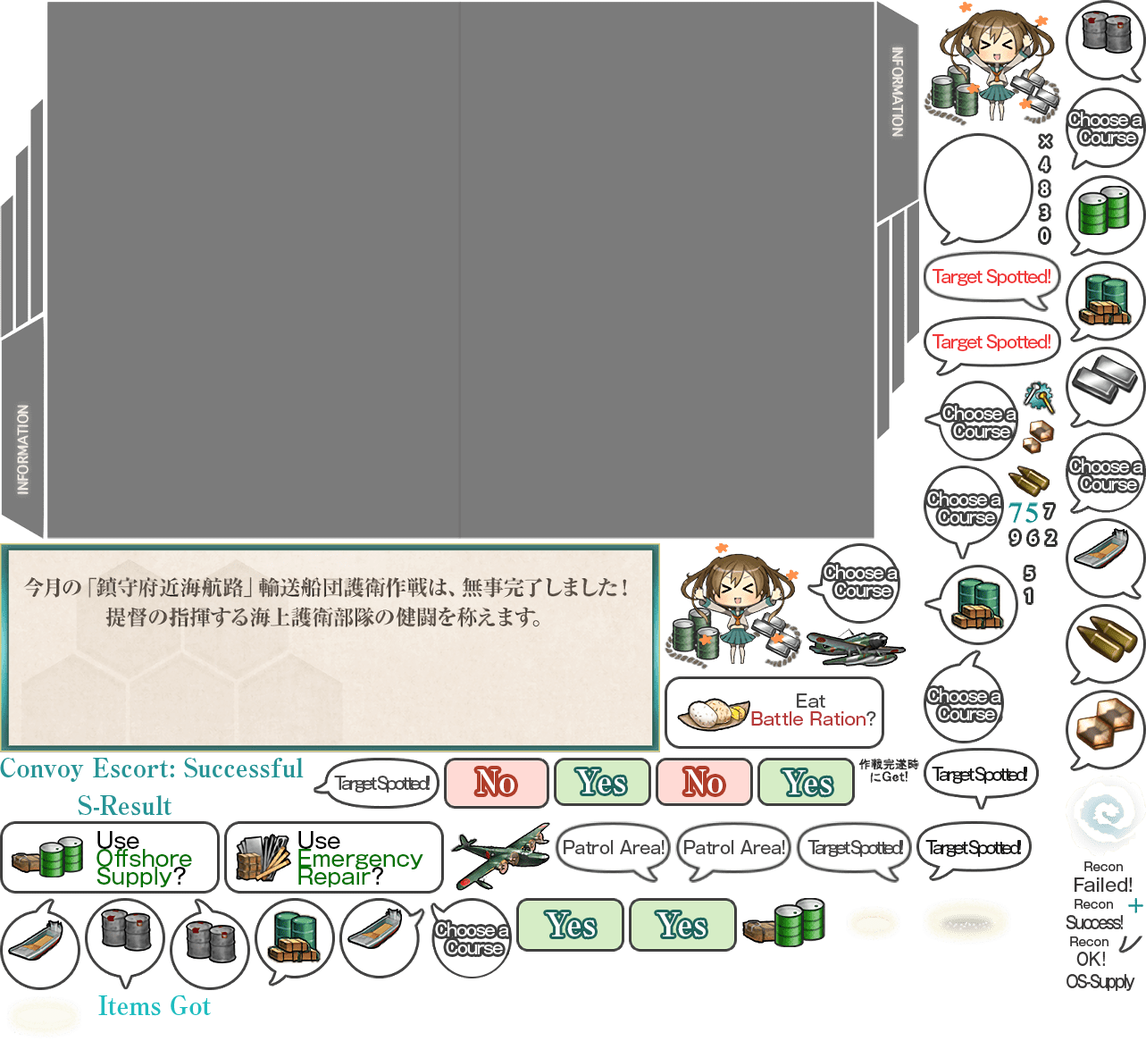
<style>
.page{position:relative;width:1146px;height:1041px;background:#7b7b7b}
.page>*{position:absolute;margin:0}
.t1{font:17px/17.9px "GothicMB101Pro-Medium";letter-spacing:-0.08em;color:#ffffff;scale:0.95 1}
.t2{font:17px "GothicMB101Pro-Medium";letter-spacing:-0.08em;color:#f13738;scale:0.95 1}
.t3{font:17px/17.9px "GothicMB101Pro-Medium";color:#b63939;scale:0.95 1}
.t4{font:17px/17.9px "GothicMB101Pro-Medium";color:#464545;scale:0.95 1}
.t5{font:25.9px "RyuminPro-ExBold";color:#279496;scale:0.95 1}
.t6{font:32.2px "RyuminPro-ExBold";color:#ffffff;scale:0.95 1}
.t7{font:17px "GothicMB101Pro-Medium";letter-spacing:-0.18em;color:#181817;scale:0.95 1}
.t8{font:17px "GothicMB101Pro-Medium";letter-spacing:-0.18em;color:#464545;scale:0.95 1}
.t9{font:21.4px/17.9px "GothicMB101Pro-Medium";color:#037302;scale:0.95 1}
.t10{font:21.4px/17.9px "GothicMB101Pro-Medium";color:#000000;scale:0.95 1}
.t11{font:17px "GothicMB101Pro-Medium";letter-spacing:-0.02em;color:#464545;scale:0.95 1}
.t12{font:11.6px "GothicMB101Pro-Medium";color:#373535;scale:0.95 1}
.t13{font:17.9px "GothicMB101Pro-Medium";color:#373535;scale:0.95 1}
.t14{font:17.9px "GothicMB101Pro-Medium";letter-spacing:-0.14em;color:#373535;scale:0.8 1}
.t15{font:17.9px "GothicMB101Pro-Medium";color:#373535;scale:0.8 1}
.t16{font:17.9px "GothicMB101Pro-Medium";letter-spacing:-0.12em;color:#373535;scale:0.8 1}
.t17{font:25.9px "RyuminPro-ExBold";color:#1fbdc0;scale:0.95 1}
</style>
<div class="page">
<p class="t1" style="left:1068px;top:112px;width:74px;height:32px;text-align:center">Choose a<br> Course</p>
<p class="t2" style="left:932px;top:269px;width:118px;height:17px">Target Spotted!</p>
<p class="t2" style="left:932px;top:334px;width:118px;height:17px">Target Spotted!</p>
<p class="t1" style="left:942px;top:406px;width:74px;height:32px;text-align:center">Choose a<br> Course</p>
<p class="t1" style="left:1069px;top:458px;width:74px;height:32px;text-align:center">Choose a<br> Course</p>
<p class="t1" style="left:927px;top:491px;width:74px;height:32px;text-align:center">Choose a<br> Course</p>
<p class="t1" style="left:824px;top:564px;width:74px;height:33px;text-align:center">Choose a<br> Course</p>
<p class="t1" style="left:927px;top:688px;width:74px;height:32px;text-align:center">Choose a<br> Course</p>
<p class="t3" style="left:751px;top:693px;width:125px;height:32px;text-align:center"><span class="t4">Eat <br></span>Battle Ration<span class="t4">?</span></p>
<p class="t5" style="left:0px;top:757px;width:304px;height:25px">Convoy Escort: Successful</p>
<p class="t6" style="left:477px;top:769px;width:37px;height:24px">No</p>
<p class="t6" style="left:576px;top:769px;width:49px;height:25px">Yes</p>
<p class="t6" style="left:685px;top:769px;width:38px;height:24px">No</p>
<p class="t6" style="left:782px;top:770px;width:50px;height:25px">Yes</p>
<p class="t7" style="left:932px;top:766px;width:95px;height:17px">Target Spotted!</p>
<p class="t8" style="left:334px;top:775px;width:96px;height:17px">Target Spotted!</p>
<p class="t5" style="left:78px;top:795px;width:94px;height:20px">S-Result</p>
<p class="t9" style="left:96px;top:831px;width:96px;height:56px"><span class="t10">Use <br></span>Offshore<br>Supply<span class="t10">?</span></p>
<p class="t9" style="left:298px;top:831px;width:125px;height:56px"><span class="t10">Use <br></span>Emergency <br>Repair<span class="t10">?</span></p>
<p class="t11" style="left:564px;top:840px;width:101px;height:14px">Patrol Area!</p>
<p class="t11" style="left:684px;top:840px;width:101px;height:14px">Patrol Area!</p>
<p class="t8" style="left:807px;top:840px;width:96px;height:17px">Target Spotted!</p>
<p class="t7" style="left:925px;top:840px;width:96px;height:17px">Target Spotted!</p>
<p class="t12" style="left:1084px;top:861px;width:39px;height:10px">Recon</p>
<p class="t13" style="left:1074px;top:877px;width:58px;height:14px">Failed!</p>
<p class="t12" style="left:1074px;top:899px;width:39px;height:9px">Recon</p>
<p class="t6" style="left:546px;top:912px;width:49px;height:25px">Yes</p>
<p class="t6" style="left:656px;top:912px;width:50px;height:25px">Yes</p>
<p class="t14" style="left:1066px;top:915px;width:57px;height:14px">Success!</p>
<p class="t1" style="left:435px;top:922px;width:74px;height:32px;text-align:center">Choose a<br> Course</p>
<p class="t12" style="left:1070px;top:936px;width:38px;height:10px">Recon</p>
<p class="t15" style="left:1076px;top:951px;width:29px;height:15px">OK!</p>
<p class="t16" style="left:1066px;top:974px;width:69px;height:17px">OS-Supply</p>
<p class="t17" style="left:98px;top:994px;width:113px;height:22px">Items Got</p>
</div>
